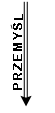
<style>
.page{position:relative;width:55px;height:113px;background:#ffffff}
.page>*{position:absolute;margin:0}
.t1{font:12.4px "ArialRoundedMTBold";letter-spacing:0.075em;color:#000000}
</style>
<div class="page">
<p class="t1" style="left:13px;top:14px;width:10px;height:76px;rotate:-90deg">PRZEMYSL</p>
</div>
